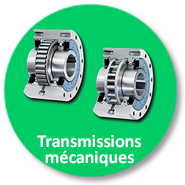
<style>
.page{position:relative;width:185px;height:185px;background:#00cc66}
.page>*{position:absolute;margin:0}
.t1{font:18px/16px "Calibri-Bold";color:#ffffff}
</style>
<div class="page">
<p class="t1" style="left:37px;top:135px;width:104px;height:32px;text-align:center">Transmissions<br>mécaniques</p>
</div>
